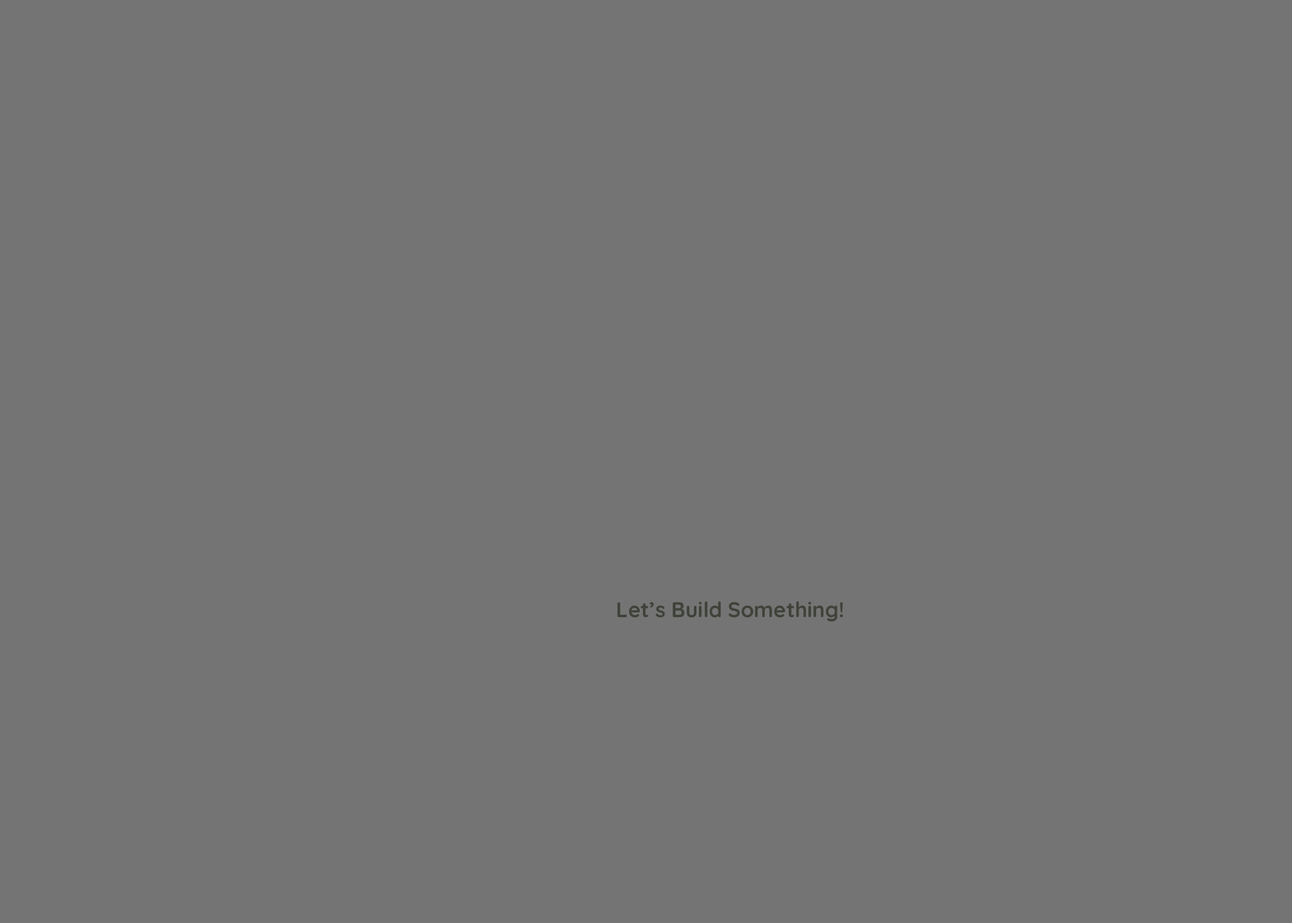
<style>
.page{position:relative;width:1292px;height:923px;background:#747474}
.page>*{position:absolute;margin:0}
.t1{font:21.3px "Quicksand-Bold";color:#3f4239}
</style>
<div class="page">
<p class="t1" style="left:617px;top:601px;width:226px;height:20px">Let’s Build Something!</p>
</div>
